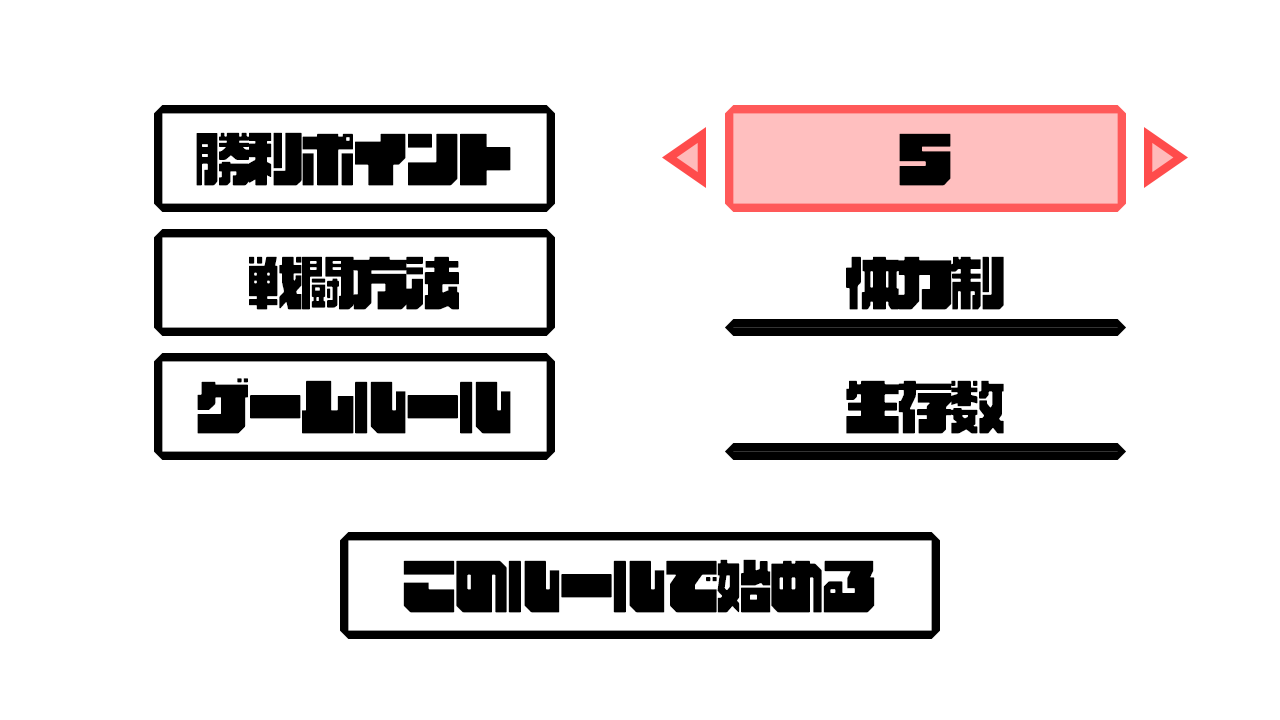
<style>
.page{position:relative;width:1280px;height:720px;background:#ffffff}
.page>*{position:absolute;margin:0}
.t1{font:58.3px "AB-countryroad";letter-spacing:-0.1em;color:#000000}
</style>
<div class="page">
<p class="t1" style="left:196px;top:132px;width:315px;height:54px">勝利ポイント</p>
<p class="t1" style="left:899px;top:133px;width:52px;height:53px">5</p>
<p class="t1" style="left:249px;top:256px;width:210px;height:54px">戦闘方法</p>
<p class="t1" style="left:846px;top:256px;width:158px;height:54px">体力制</p>
<p class="t1" style="left:197px;top:378px;width:314px;height:56px">ゲームルール</p>
<p class="t1" style="left:846px;top:380px;width:158px;height:54px">生存数</p>
<p class="t1" style="left:403px;top:559px;width:472px;height:54px">このルールで始める</p>
</div>
